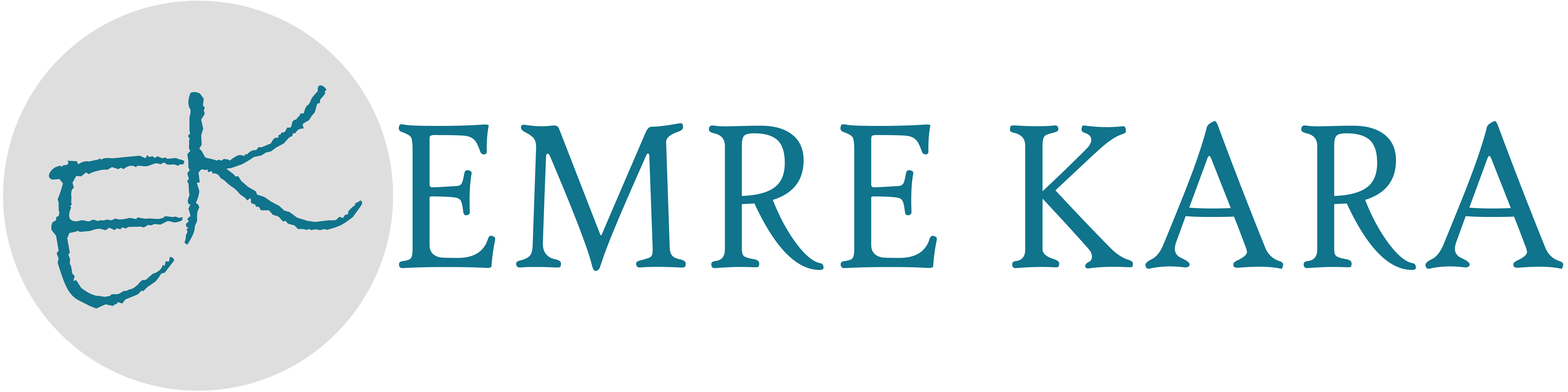
<style>
.page{position:relative;width:1568px;height:392px;background:#ffffff}
.page>*{position:absolute;margin:0}
.t1{font:277.7px "BradleyHandITC";color:#10748c;text-transform:uppercase}
.t2{font:221.4px "HighTowerText-Reg";color:#10748c;text-transform:uppercase;scale:0.89 1}
</style>
<div class="page">
<p class="t1" style="left:184px;top:85px;width:178px;height:160px">K</p>
<p class="t2" style="left:399px;top:121px;width:1164px;height:150px">EMRE KARA</p>
<p class="t1" style="left:49px;top:155px;width:135px;height:154px">E</p>
</div>
